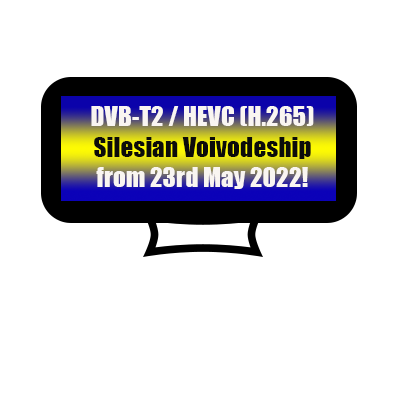
<style>
.page{position:relative;width:400px;height:400px;background:#ffffff}
.page>*{position:absolute;margin:0}
.t1{font:25.4px "Impact";color:#f9f5f1}
.t2{font:25.4px "Impact";color:#0c0c0b}
</style>
<div class="page">
<p class="t1" style="left:91px;top:106px;width:223px;height:83px;text-align:center">DVB-T2 / HEVC (H.265)  <span class="t2">Silesian Voivodeship</span> from 23rd May 2022!</p>
</div>
